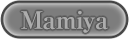
<style>
.page{position:relative;width:129px;height:39px}
.page>*{position:absolute;margin:0}
.t1{font:24px "RyuminPro-ExBold";letter-spacing:-0.04em;color:#acadae}
</style>
<div class="page">
<p class="t1" style="left:21px;top:10px;width:88px;height:23px">Mamiya</p>
</div>
